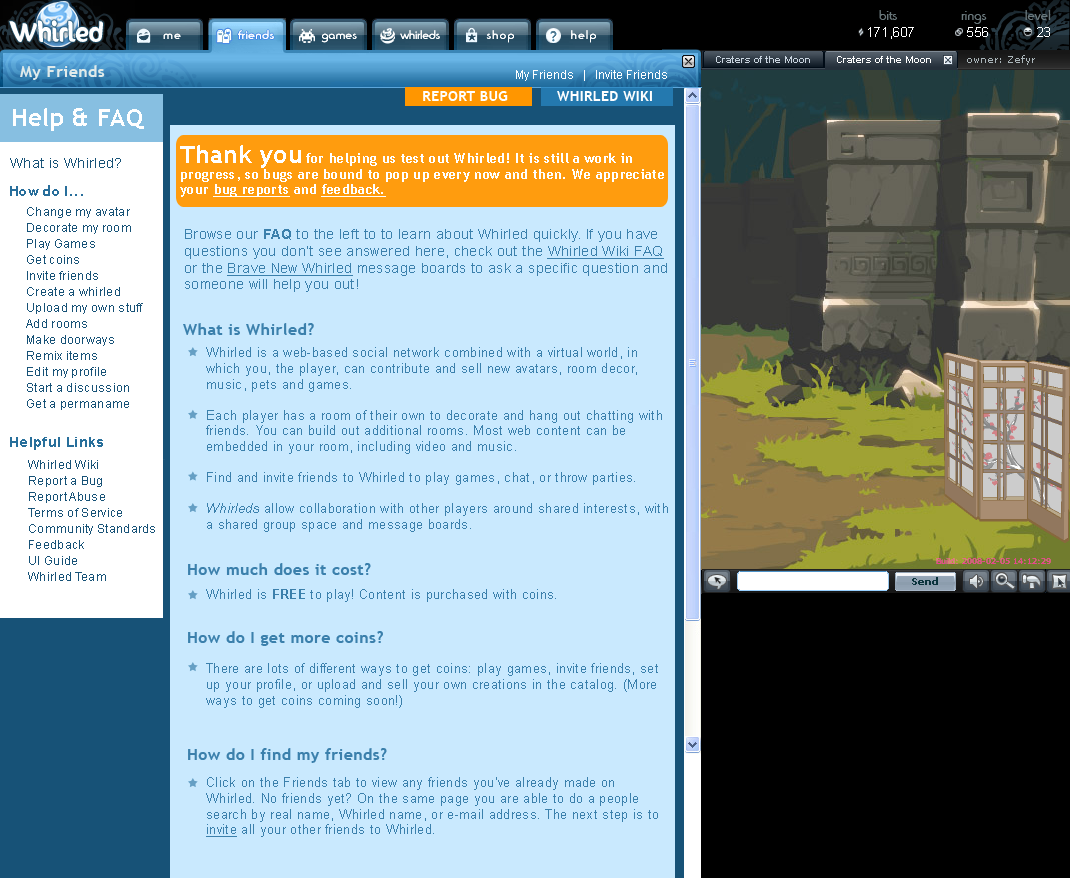
<style>
.page{position:relative;width:1070px;height:878px;background:#c9e9fe}
.page>*{position:absolute;margin:0}
.t1{font:14px "TrebuchetMS-Bold";letter-spacing:0.025em;color:#ffffff}
.t2{font:24px "TrebuchetMS-Bold";letter-spacing:0.025em;color:#ffffff}
.t3{font:13px "TrebuchetMS-Bold";letter-spacing:0.025em;color:#ffffff}
.t4{font:13px "TrebuchetMS-Bold";letter-spacing:0.025em;color:#ffffff;text-decoration:underline}
.t5{font:14px "ArialMT";letter-spacing:0.025em;color:#175277}
.t6{font:14px "TrebuchetMS-Bold";letter-spacing:0.025em;color:#286e9b}
.t7{font:12px/16px "ArialMT";letter-spacing:0.025em;color:#175277}
.t8{font:14px "ArialMT";letter-spacing:0.025em;color:#3b80ac}
.t9{font:14px "Arial-BoldMT";letter-spacing:0.025em;color:#3b80ac}
.t10{font:14px "ArialMT";letter-spacing:0.025em;color:#3b80ac;text-decoration:underline}
.t11{font:16px "TrebuchetMS-Bold";letter-spacing:0.025em;color:#3b80ac}
.t12{font:13px "ArialMT";letter-spacing:0.025em;color:#3b80ac}
.t13{font:13px "Arial-ItalicMT";letter-spacing:0.025em;color:#3b80ac}
.t14{font:14px "Arial-BoldMT";letter-spacing:0.025em;color:#286f9b}
.t15{font:13px "Arial-BoldMT";letter-spacing:0.025em;color:#3b80ac}
.t16{font:13px "ArialMT";letter-spacing:0.025em;color:#3b80ac;text-decoration:underline}
</style>
<div class="page">
<p class="t1" style="left:423px;top:91px;width:85px;height:10px">REPORT BUG</p>
<p class="t1" style="left:557px;top:91px;width:95px;height:10px">WHIRLED WIKI</p>
<p class="t2" style="left:13px;top:108px;width:131px;height:23px">Help &amp; FAQ</p>
<p class="t3" style="left:180px;top:145px;width:484px;height:52px"><span class="t2">Thank you </span>for helping us test out Whirled! It is still a work in progress, so bugs are bound to pop up every now and then. We appreciate your <span class="t4">bug reports</span> and <span class="t4">feedback.</span></p>
<p class="t5" style="left:10px;top:158px;width:111px;height:10px">What is Whirled?</p>
<p class="t6" style="left:10px;top:185px;width:73px;height:11px">How do I...</p>
<p class="t7" style="left:26px;top:207px;width:117px;height:203px">Change my avatar<br>Decorate my room<br>Play Games<br>Get coins<br>Invite friends<br>Create a whirled<br>Upload my own stuff<br>Add rooms<br>Make doorways<br>Remix items<br>Edit my profile<br>Start a discussion<br>Get a permaname</p>
<p class="t8" style="left:185px;top:229px;width:482px;height:63px">Browse our <span class="t9">FAQ</span> to the left to to learn about Whirled quickly. If you have questions you don’t see answered here, check out the <span class="t10">Whirled Wiki FAQ</span> or the <span class="t10">Brave New Whirled</span> message boards to ask a specific question and someone will help you out!</p>
<p class="t11" style="left:183px;top:323px;width:131px;height:12px">What is Whirled?</p>
<p class="t12" style="left:206px;top:347px;width:462px;height:185px">Whirled is a web-based social network combined with a virtual world, in which you, the player, can contribute and sell new avatars, room decor, music, pets and games.<br><br>Each player has a room of their own to decorate and hang out chatting with friends. You can build out additional rooms. Most web content can be embedded in your room, including video and music.<br><br>Find and invite friends to Whirled to play games, chat, or throw parties.<br><span class="t13">   <br>Whirleds</span> allow collaboration with other players around shared interests, with a shared group space and message boards.</p>
<p class="t14" style="left:10px;top:437px;width:93px;height:13px">Helpful Links</p>
<p class="t7" style="left:28px;top:460px;width:127px;height:121px">Whirled Wiki<br>Report a Bug<br>Report Abuse<br>Terms of Service<br>Community Standards<br>Feedback<br>UI Guide<br>Whirled Team</p>
<p class="t11" style="left:188px;top:563px;width:183px;height:12px">How much does it cost?</p>
<p class="t12" style="left:206px;top:589px;width:350px;height:13px">Whirled is <span class="t15">FREE</span> to play! Content is purchased with coins.</p>
<p class="t11" style="left:188px;top:631px;width:195px;height:15px">How do I get more coins?</p>
<p class="t12" style="left:206px;top:663px;width:452px;height:45px">There are lots of different ways to get coins: play games, invite friends, set up your profile, or upload and sell your own creations in the catalog. (More ways to get coins coming soon!)</p>
<p class="t11" style="left:188px;top:748px;width:199px;height:15px">How do I find my friends?</p>
<p class="t12" style="left:206px;top:777px;width:452px;height:60px">Click on the Friends tab to view any friends you’ve already made on Whirled. No friends yet? On the same page you are able to do a people search by real name, Whirled name, or e-mail address. The next step is to <span class="t16">invite</span> all your other friends to Whirled.</p>
</div>
